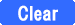
<style>
.page{position:relative;width:75px;height:25px;background:#326bff}
.page>*{position:absolute;margin:0}
.t1{font:18px "HGPGothicE";color:#ffffff;font-weight:bold}
</style>
<div class="page">
<p class="t1" style="left:18px;top:5px;width:40px;height:16px">Clear</p>
</div>
